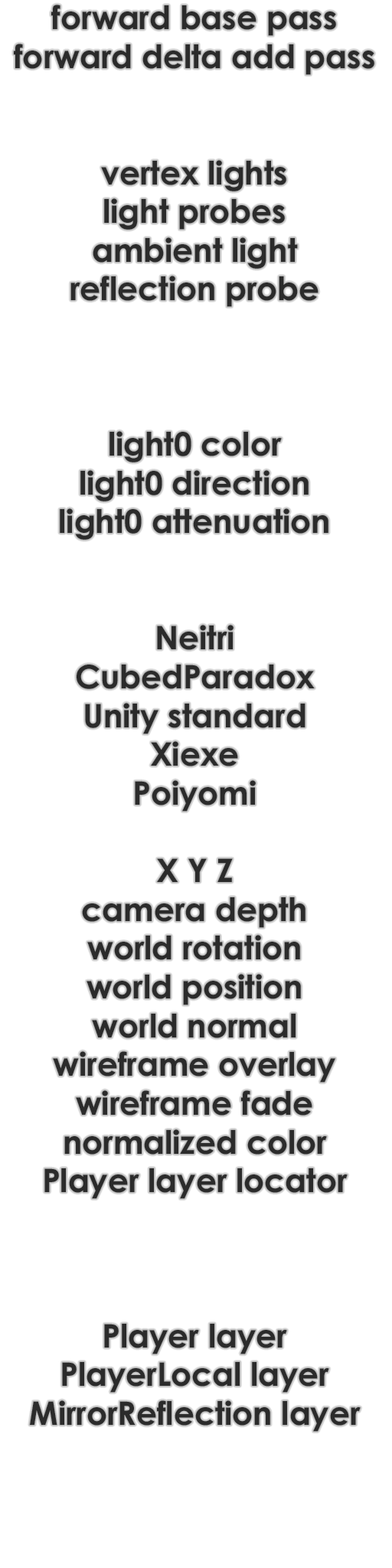
<style>
.page{position:relative;width:392px;height:1568px;background:#ffffff}
.page>*{position:absolute;margin:0}
.t1{font:32.3px "CenturyGothic-Bold";color:#272727}
</style>
<div class="page">
<p class="t1" style="left:14px;top:5px;width:360px;height:1427px;text-align:center">forward base pass<br>forward delta add pass<br><br><br>vertex lights<br>light probes<br>ambient light<br>reflection probe<br><br><br><br>light0 color<br>light0 direction<br>light0 attenuation<br><br><br>Neitri<br>CubedParadox<br>Unity standard<br>Xiexe<br>Poiyomi<br><br>X Y Z<br>camera depth<br>world rotation<br>world position<br>world normal<br>wireframe overlay<br>wireframe fade<br>normalized color<br>Player layer locator<br><br><br><br>Player layer<br>PlayerLocal layer<br>MirrorReflection layer</p>
</div>
